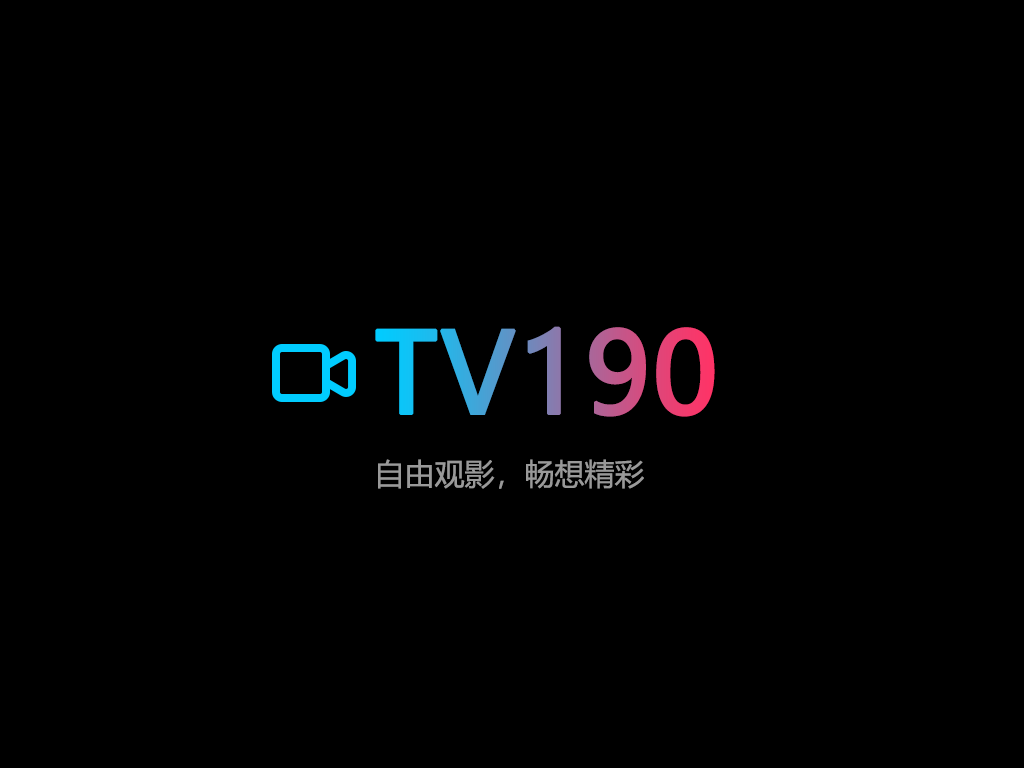
<style>
.page{position:relative;width:1024px;height:768px;background:#000000}
.page>*{position:absolute;margin:0}
.t1{font:110px "MicrosoftYaHei";font-weight:bold}
.t2{font:30px "MicrosoftYaHei";color:#999999}
</style>
<div class="page">
<p class="t1" style="left:375px;top:326px;width:340px;height:91px">TV190</p>
<p class="t2" style="left:378px;top:459px;width:266px;height:30px">自由观影，畅想精彩</p>
</div>
